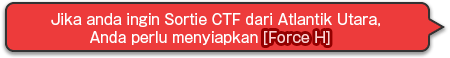
<style>
.page{position:relative;width:450px;height:58px;background:#ed3b3b}
.page>*{position:absolute;margin:0}
.t1{font:14px/18px "GothicMB101Pro-Regular";color:#ffffff}
</style>
<div class="page">
<p class="t1" style="left:51px;top:13px;width:329px;height:32px;text-align:center">Jika anda ingin Sortie CTF dari Atlantik Utara,<br>Anda perlu menyiapkan</p>
</div>
